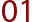
<style>
.page{position:relative;width:32px;height:22px;background:#ffffff}
.page>*{position:absolute;margin:0}
.t1{font:33px "MyriadPro-Regular";color:#820a0a}
</style>
<div class="page">
<p class="t1" style="left:2px;top:0px;width:27px;height:22px">01</p>
</div>
